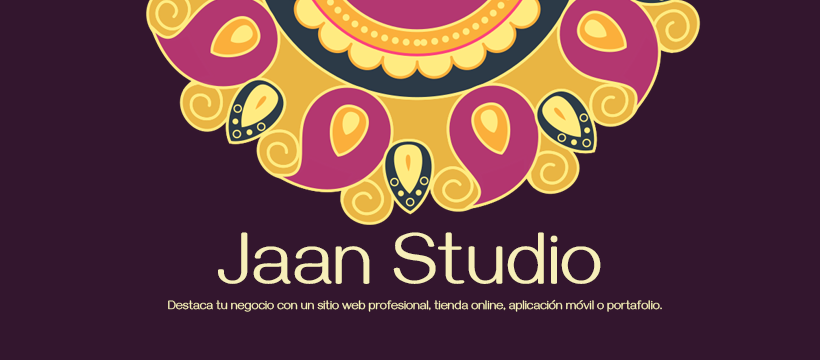
<style>
.page{position:relative;width:820px;height:360px;background:#33162e}
.page>*{position:absolute;margin:0}
.t1{font:75px "Gayathri-Regular";color:#f8efba}
.t2{font:12.5px "Gayathri-Regular";color:#f8efba}
</style>
<div class="page">
<p class="t1" style="left:218px;top:232px;width:383px;height:52px">Jaan Studio</p>
<p class="t2" style="left:168px;top:299px;width:494px;height:13px">Destaca tu negocio con un sitio web profesional, tienda online, aplicación móvil o portafolio.</p>
</div>
